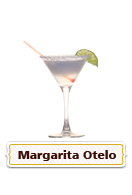
<style>
.page{position:relative;width:132px;height:195px;background:#ffffff}
.page>*{position:absolute;margin:0}
.t1{font:11.4px "Humanist777BT-BlackB";color:#3a0f07;scale:1.05 1}
</style>
<div class="page">
<p class="t1" style="left:18px;top:150px;width:98px;height:11px">Margarita Otelo</p>
</div>
